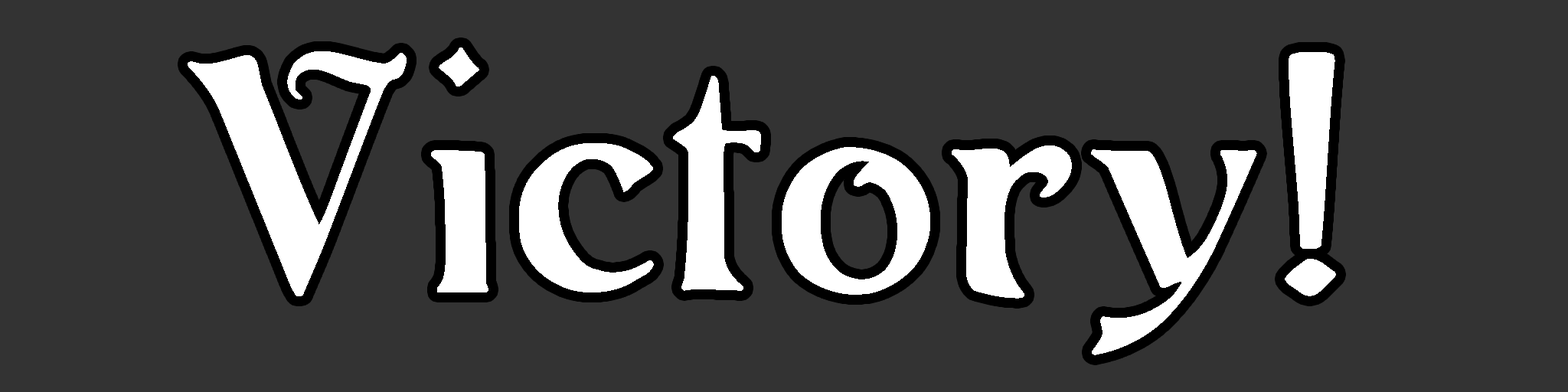
<style>
.page{position:relative;width:1568px;height:392px;background:#333333}
.page>*{position:absolute;margin:0}
.t1{font:326.9px "Argos-Regular";letter-spacing:0.01em;color:#ffffff}
</style>
<div class="page">
<p class="t1" style="left:188px;top:47px;width:1148px;height:308px">Victory!</p>
</div>
